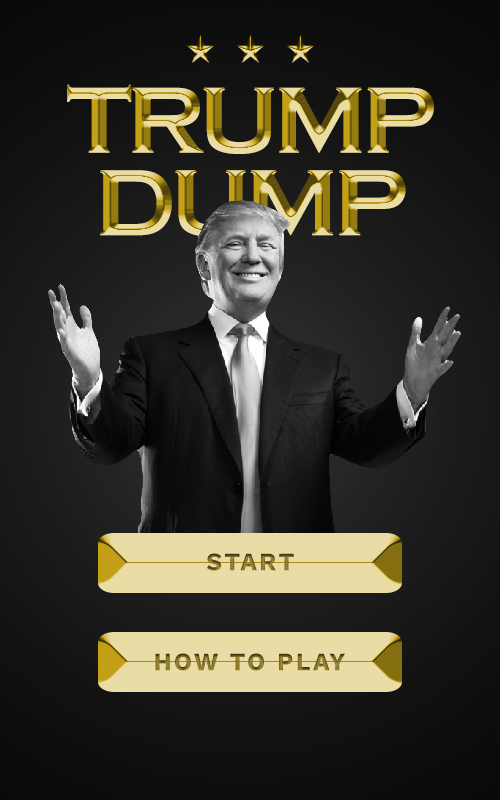
<style>
.page{position:relative;width:500px;height:800px}
.page>*{position:absolute;margin:0}
.t1{font:96.4px/82.6px "CopperplateGothic-Bold";letter-spacing:-0.07em;font-weight:bold}
.t2{font:25px "WorkSans-Bold";letter-spacing:0.1em}
.t3{font:25px "WorkSans-Bold";letter-spacing:0.1em;text-transform:uppercase}
</style>
<div class="page">
<p class="t1" style="left:67px;top:84px;width:367px;height:153px;text-align:center">TRUMP<br>DUMP</p>
<p class="t2" style="left:207px;top:553px;width:87px;height:18px">START</p>
<p class="t3" style="left:155px;top:653px;width:190px;height:18px">how to play</p>
</div>
